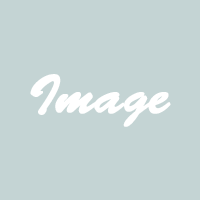
<style>
.page{position:relative;width:200px;height:200px;background:#c4d4d4}
.page>*{position:absolute;margin:0}
.t1{font:54.2px "BrushScriptStd";color:#ffffff;font-weight:bold}
</style>
<div class="page">
<p class="t1" style="left:30px;top:74px;width:141px;height:53px">Image</p>
</div>
